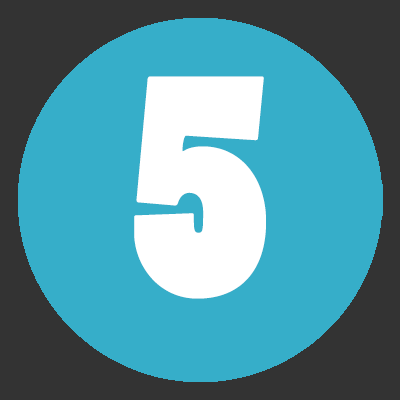
<style>
.page{position:relative;width:400px;height:400px;background:#36aec9}
.page>*{position:absolute;margin:0}
.t1{font:300px "PoplarStd";color:#ffffff}
</style>
<div class="page">
<p class="t1" style="left:134px;top:76px;width:132px;height:223px">5</p>
</div>
